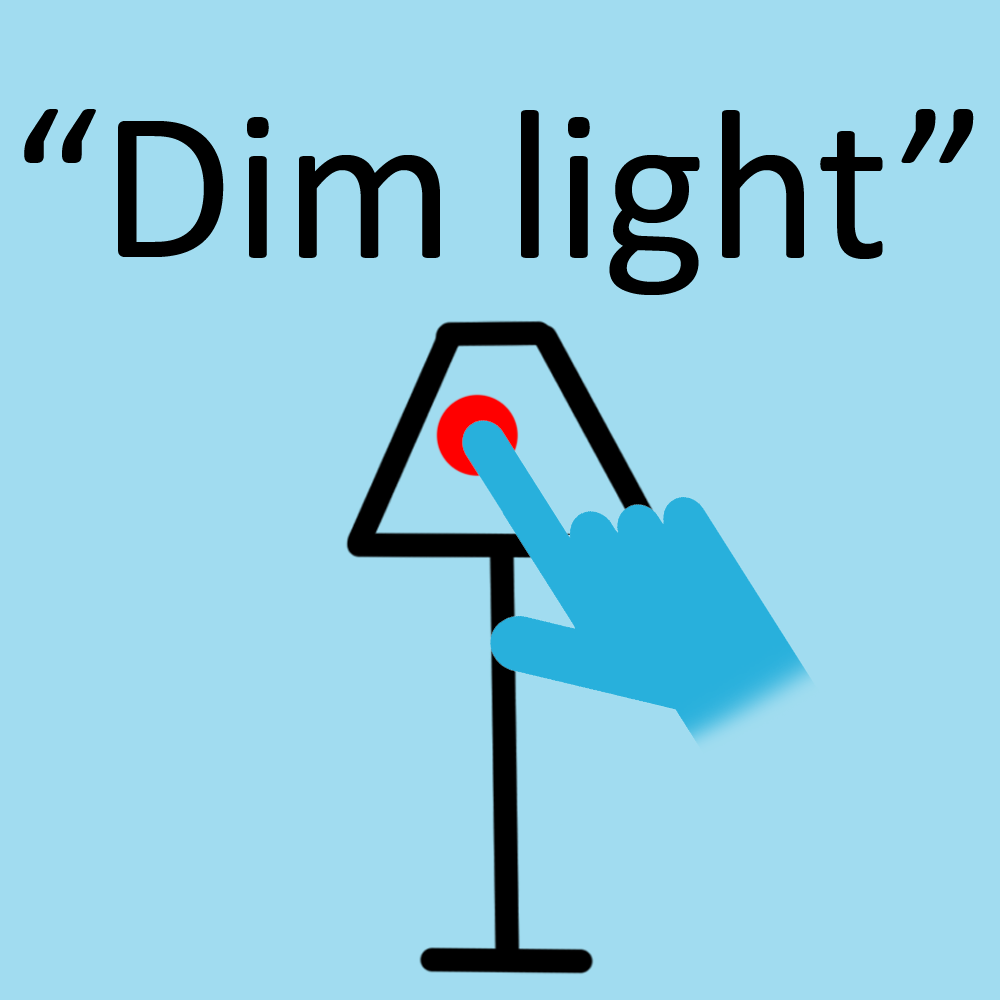
<style>
.page{position:relative;width:1000px;height:1000px;background:#a1dcf0}
.page>*{position:absolute;margin:0}
.t1{font:216.3px "Calibri";color:#000000}
</style>
<div class="page">
<p class="t1" style="left:24px;top:109px;width:950px;height:186px">“Dim light”</p>
</div>
